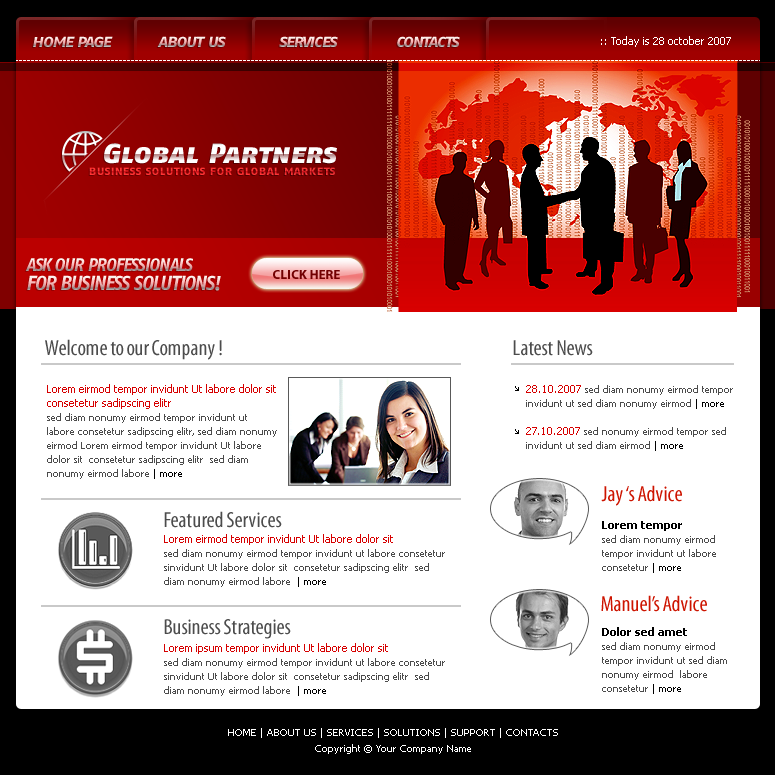
<style>
.page{position:relative;width:775px;height:775px;background:#ffffff}
.page>*{position:absolute;margin:0}
.t1{font:18px "FagoNo-BoldItalicCaps";letter-spacing:-0.08em}
.t2{font:11px "Tahoma";color:#ffffff}
.t3{font:28px "FagoNo-BlackItalicCaps";color:#ffffff}
.t4{font:13px "FagoNo-BoldCaps";color:#f83636}
.t5{font:13px "MyriadPro-Bold";letter-spacing:-0.01em;color:#720001;text-transform:uppercase}
.t6{font:20px "FagoNo-BoldItalicCaps";letter-spacing:-0.08em}
.t7{font:22px "MyriadPro-Cond";color:#4c4c4c}
.t8{font:10px/14px "Tahoma";color:#4b4b4b}
.t9{font:11px/14px "Tahoma";color:#d60000}
.t10{font:10px/14px "Tahoma";color:#000000}
.t11{font:22px "MyriadPro-Cond";color:#cd1400}
.t12{font:11px/14px "Tahoma-Bold";color:#000000}
.t13{font:10px/16px "Tahoma";color:#ffffff}
</style>
<div class="page">
<p class="t1" style="left:33px;top:36px;width:80px;height:11px">home page</p>
<p class="t1" style="left:157px;top:36px;width:69px;height:11px">about us</p>
<p class="t1" style="left:279px;top:36px;width:59px;height:11px">services</p>
<p class="t1" style="left:397px;top:36px;width:63px;height:11px">contacts</p>
<p class="t2" style="left:601px;top:36px;width:130px;height:11px">:: Today is 28 october 2007</p>
<p class="t3" style="left:104px;top:143px;width:233px;height:21px">Global Partners</p>
<p class="t4" style="left:89px;top:167px;width:246px;height:8px">business solutions for global markets</p>
<p class="t1" style="left:25px;top:258px;width:168px;height:14px">ASK OUR PROFESSIONALS</p>
<p class="t5" style="left:273px;top:270px;width:67px;height:9px">click here</p>
<p class="t6" style="left:27px;top:275px;width:194px;height:16px">FOR BUSINESS SOLUTIONS!</p>
<p class="t7" style="left:45px;top:339px;width:177px;height:21px">Welcome to our Company !</p>
<p class="t7" style="left:513px;top:340px;width:80px;height:16px">Latest News</p>
<p class="t8" style="left:47px;top:384px;width:230px;height:95px"><span class="t9">Lorem eirmod tempor invidunt Ut labore dolor sit  consetetur sadipscing elitr<br></span>sed diam nonumy eirmod tempor invidunt ut labore consetetur sadipscing elitr, sed diam nonumy eirmod Lorem eirmod tempor invidunt Ut labore dolor sit  consetetur sadipscing elitr  sed diam nonumy eirmod labore <span class="t10">| more</span></p>
<p class="t8" style="left:526px;top:385px;width:207px;height:66px"><span class="t9">28.10.2007 </span>sed diam nonumy eirmod tempor invidunt ut sed diam nonumy eirmod <span class="t10">| more<br><br></span><span class="t9">27.10.2007 </span>sed nonumy eirmod tempor sed invidunt ut sed diam eirmod <span class="t10">| more</span></p>
<p class="t11" style="left:601px;top:485px;width:81px;height:21px">Jay ‘s Advice</p>
<p class="t7" style="left:164px;top:511px;width:118px;height:17px">Featured Services</p>
<p class="t8" style="left:602px;top:521px;width:114px;height:52px"><span class="t12">Lorem tempor  <br></span>sed diam nonumy eirmod tempor invidunt ut labore consetetur <span class="t10">| more</span></p>
<p class="t8" style="left:164px;top:534px;width:281px;height:53px"><span class="t9">Lorem eirmod tempor invidunt Ut labore dolor sit  <br></span>sed diam nonumy eirmod tempor invidunt ut labore consetetur sinvidunt Ut labore dolor sit  consetetur sadipscing elitr  sed diam nonumy eirmod labore<span class="t10">  | more</span></p>
<p class="t11" style="left:601px;top:595px;width:106px;height:17px">Manuel’s Advice</p>
<p class="t7" style="left:164px;top:619px;width:127px;height:20px">Business Strategies</p>
<p class="t8" style="left:602px;top:627px;width:125px;height:67px"><span class="t12">Dolor sed amet<br></span>sed diam nonumy eirmod tempor invidunt ut sed diam nonumy eirmod  labore consetetur<span class="t10"> | more</span></p>
<p class="t8" style="left:164px;top:643px;width:281px;height:53px"><span class="t9">Lorem ipsum tempor invidunt Ut labore dolor sit  <br></span>sed diam nonumy eirmod tempor invidunt ut labore consetetur sinvidunt Ut labore dolor sit  consetetur sadipscing elitr  sed diam nonumy eirmod labore<span class="t10">  | more</span></p>
<p class="t13" style="left:228px;top:728px;width:330px;height:26px;text-align:center">HOME | ABOUT US | SERVICES | SOLUTIONS | SUPPORT | CONTACTS<br>Copyright © Your Company Name</p>
</div>
